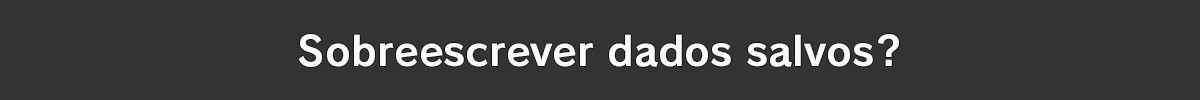
<style>
.page{position:relative;width:1200px;height:100px;background:#333333}
.page>*{position:absolute;margin:0}
.t1{font:40px "RodinPro-B";color:#fbfafb}
</style>
<div class="page">
<p class="t1" style="left:298px;top:34px;width:601px;height:33px">Sobreescrever dados salvos?</p>
</div>
